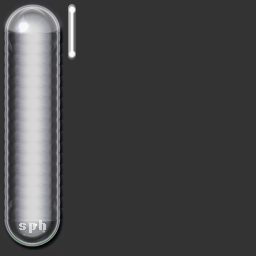
<style>
.page{position:relative;width:256px;height:256px;background:#333333}
.page>*{position:absolute;margin:0}
.t1{font:10px "System";color:#d1d1d3;font-weight:bold}
.t2{font:10px "System";color:#cccdd0;font-weight:bold}
.t3{font:10px "System";color:#dadada;font-weight:bold}
</style>
<div class="page">
<p class="t1" style="left:39px;top:220px;width:7px;height:10px">h</p>
<p class="t2" style="left:19px;top:223px;width:7px;height:7px">s</p>
<p class="t3" style="left:29px;top:223px;width:7px;height:10px">p</p>
</div>
